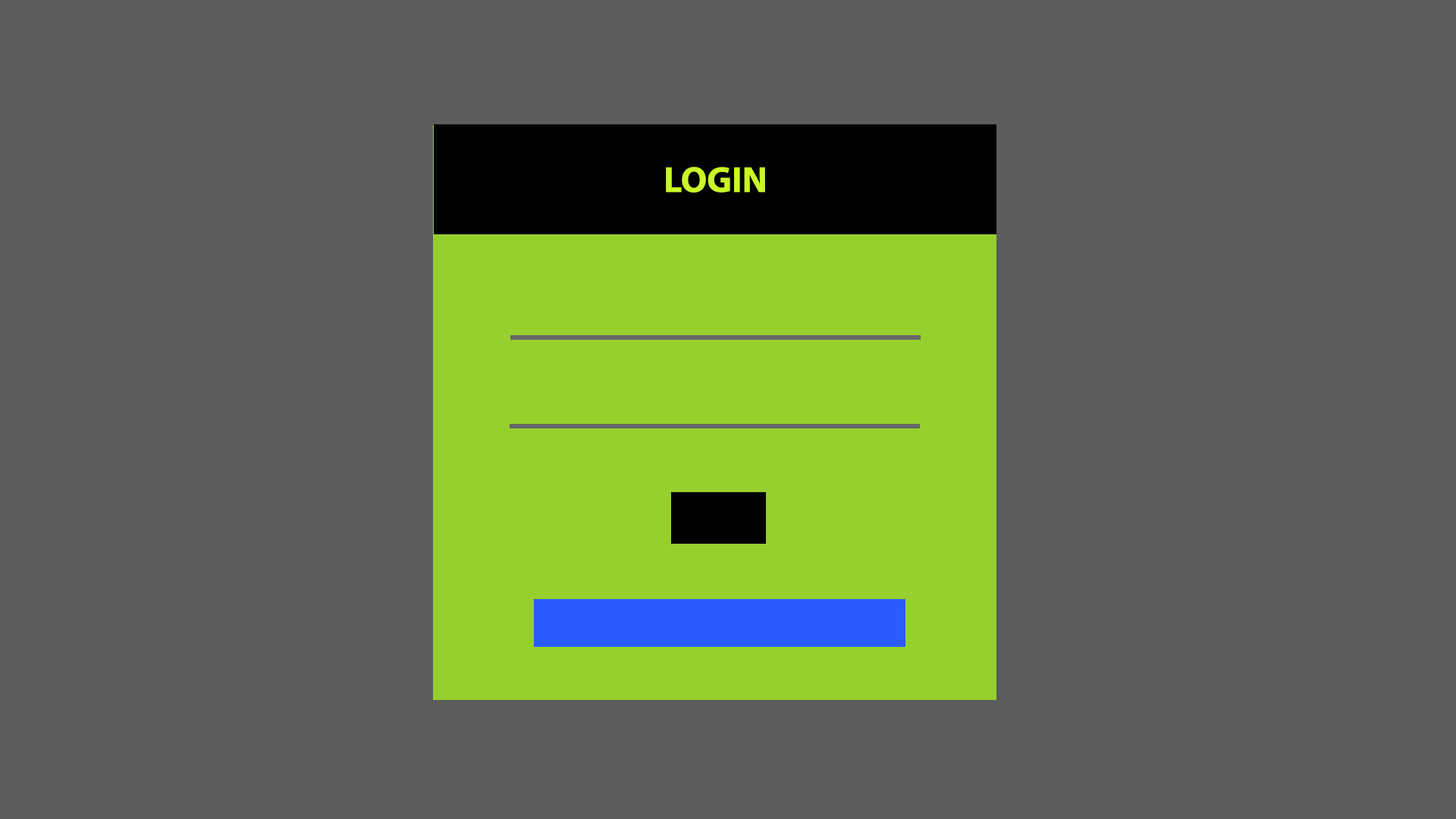
<style>
.page{position:relative;width:1456px;height:819px;background:#5c5c5c}
.page>*{position:absolute;margin:0}
.t1{font:36.4px "MyriadHebrew-Bold";color:#c9f827}
</style>
<div class="page">
<p class="t1" style="left:666px;top:167px;width:99px;height:26px">LOGIN</p>
</div>
